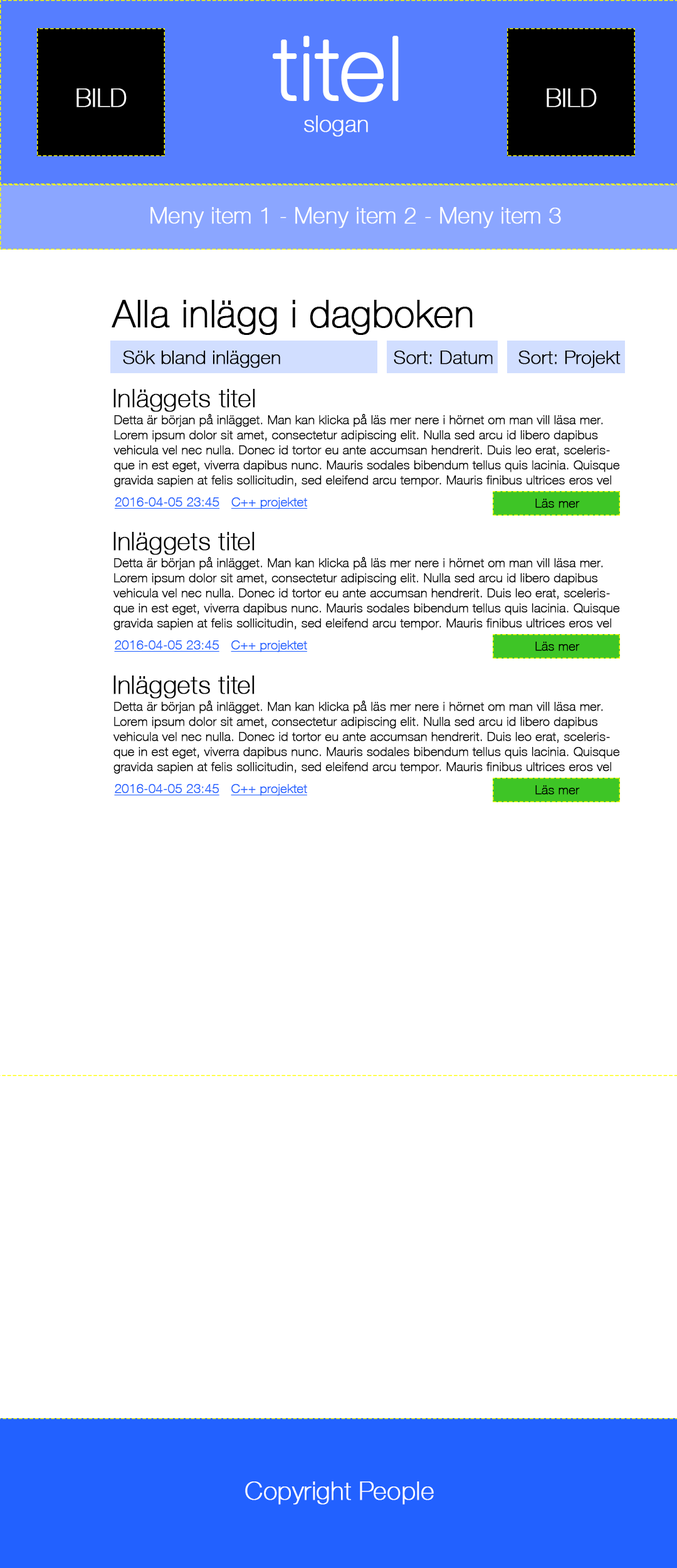
<style>
.page{position:relative;width:677px;height:1568px;background:#ffffff}
.page>*{position:absolute;margin:0}
.t1{font:87.8px "HelveticaNeue-Thin";color:#ffffff;font-weight:bold}
.t2{font:25.1px "HelveticaNeue-Thin";color:#ffffff;font-weight:bold}
.t3{font:22.6px "HelveticaNeue-Thin";color:#fefefe;font-weight:bold}
.t4{font:37.6px "HelveticaNeue-Thin";color:#000000;font-weight:bold}
.t5{font:18.8px "HelveticaNeue-Thin";color:#000000;font-weight:bold}
.t6{font:25.1px "HelveticaNeue-Thin";color:#000000;font-weight:bold}
.t7{font:12.5px "HelveticaNeue-Thin";color:#000000;font-weight:bold}
.t8{font:12.5px "HelveticaNeue-Thin";color:#2261ff;font-weight:bold;text-decoration:underline}
</style>
<div class="page">
<p class="t1" style="left:273px;top:36px;width:126px;height:66px">titel</p>
<p class="t2" style="left:77px;top:88px;width:50px;height:19px">BILD</p>
<p class="t2" style="left:547px;top:88px;width:50px;height:19px">BILD</p>
<p class="t3" style="left:304px;top:115px;width:64px;height:22px">slogan</p>
<p class="t3" style="left:151px;top:207px;width:410px;height:21px">Meny item 1 - Meny item 2 - Meny item 3</p>
<p class="t4" style="left:112px;top:300px;width:361px;height:35px">Alla inlägg i dagboken</p>
<p class="t5" style="left:123px;top:351px;width:157px;height:17px">Sök bland inläggen</p>
<p class="t5" style="left:394px;top:351px;width:99px;height:13px">Sort: Datum</p>
<p class="t5" style="left:519px;top:351px;width:102px;height:17px">Sort: Projekt</p>
<p class="t6" style="left:114px;top:389px;width:141px;height:23px">Inläggets titel</p>
<p class="t7" style="left:114px;top:414px;width:506px;height:73px">Detta är början på inlägget. Man kan klicka på läs mer nere i hörnet om man vill läsa mer. Lorem ipsum dolor sit amet, consectetur adipiscing elit. Nulla sed arcu id libero dapibus vehicula vel nec nulla. Donec id tortor eu ante accumsan hendrerit. Duis leo erat, scelerisque in est eget, viverra dapibus nunc. Mauris sodales bibendum tellus quis lacinia. Quisque gravida sapien at felis sollicitudin, sed eleifend arcu tempor. Mauris finibus ultrices eros vel finibus. Etiam id faucibus turpis. Nunc id elementum sem. In quis dolor ipsum. Sed nec lorem id diam rutrum tempus at et dui. Proin dapibus luctus lobortis. Praesent vitae eleifend massa.</p>
<p class="t8" style="left:114px;top:497px;width:106px;height:12px">2016-04-05 23:45</p>
<p class="t8" style="left:231px;top:497px;width:77px;height:12px">C++ projektet</p>
<p class="t7" style="left:536px;top:499px;width:44px;height:9px">Läs mer</p>
<p class="t6" style="left:114px;top:532px;width:141px;height:23px">Inläggets titel</p>
<p class="t7" style="left:113px;top:557px;width:507px;height:73px">Detta är början på inlägget. Man kan klicka på läs mer nere i hörnet om man vill läsa mer. Lorem ipsum dolor sit amet, consectetur adipiscing elit. Nulla sed arcu id libero dapibus vehicula vel nec nulla. Donec id tortor eu ante accumsan hendrerit. Duis leo erat, scelerisque in est eget, viverra dapibus nunc. Mauris sodales bibendum tellus quis lacinia. Quisque gravida sapien at felis sollicitudin, sed eleifend arcu tempor. Mauris finibus ultrices eros vel finibus. Etiam id faucibus turpis. Nunc id elementum sem. In quis dolor ipsum. Sed nec lorem id diam rutrum tempus at et dui. Proin dapibus luctus lobortis. Praesent vitae eleifend massa.</p>
<p class="t8" style="left:114px;top:640px;width:106px;height:12px">2016-04-05 23:45</p>
<p class="t8" style="left:231px;top:640px;width:76px;height:12px">C++ projektet</p>
<p class="t7" style="left:536px;top:642px;width:44px;height:9px">Läs mer</p>
<p class="t6" style="left:114px;top:675px;width:141px;height:24px">Inläggets titel</p>
<p class="t7" style="left:113px;top:701px;width:507px;height:73px">Detta är början på inlägget. Man kan klicka på läs mer nere i hörnet om man vill läsa mer. Lorem ipsum dolor sit amet, consectetur adipiscing elit. Nulla sed arcu id libero dapibus vehicula vel nec nulla. Donec id tortor eu ante accumsan hendrerit. Duis leo erat, scelerisque in est eget, viverra dapibus nunc. Mauris sodales bibendum tellus quis lacinia. Quisque gravida sapien at felis sollicitudin, sed eleifend arcu tempor. Mauris finibus ultrices eros vel finibus. Etiam id faucibus turpis. Nunc id elementum sem. In quis dolor ipsum. Sed nec lorem id diam rutrum tempus at et dui. Proin dapibus luctus lobortis. Praesent vitae eleifend massa.</p>
<p class="t8" style="left:114px;top:784px;width:106px;height:12px">2016-04-05 23:45</p>
<p class="t8" style="left:231px;top:784px;width:76px;height:12px">C++ projektet</p>
<p class="t7" style="left:536px;top:785px;width:44px;height:10px">Läs mer</p>
<p class="t2" style="left:245px;top:1481px;width:189px;height:24px">Copyright People</p>
</div>
